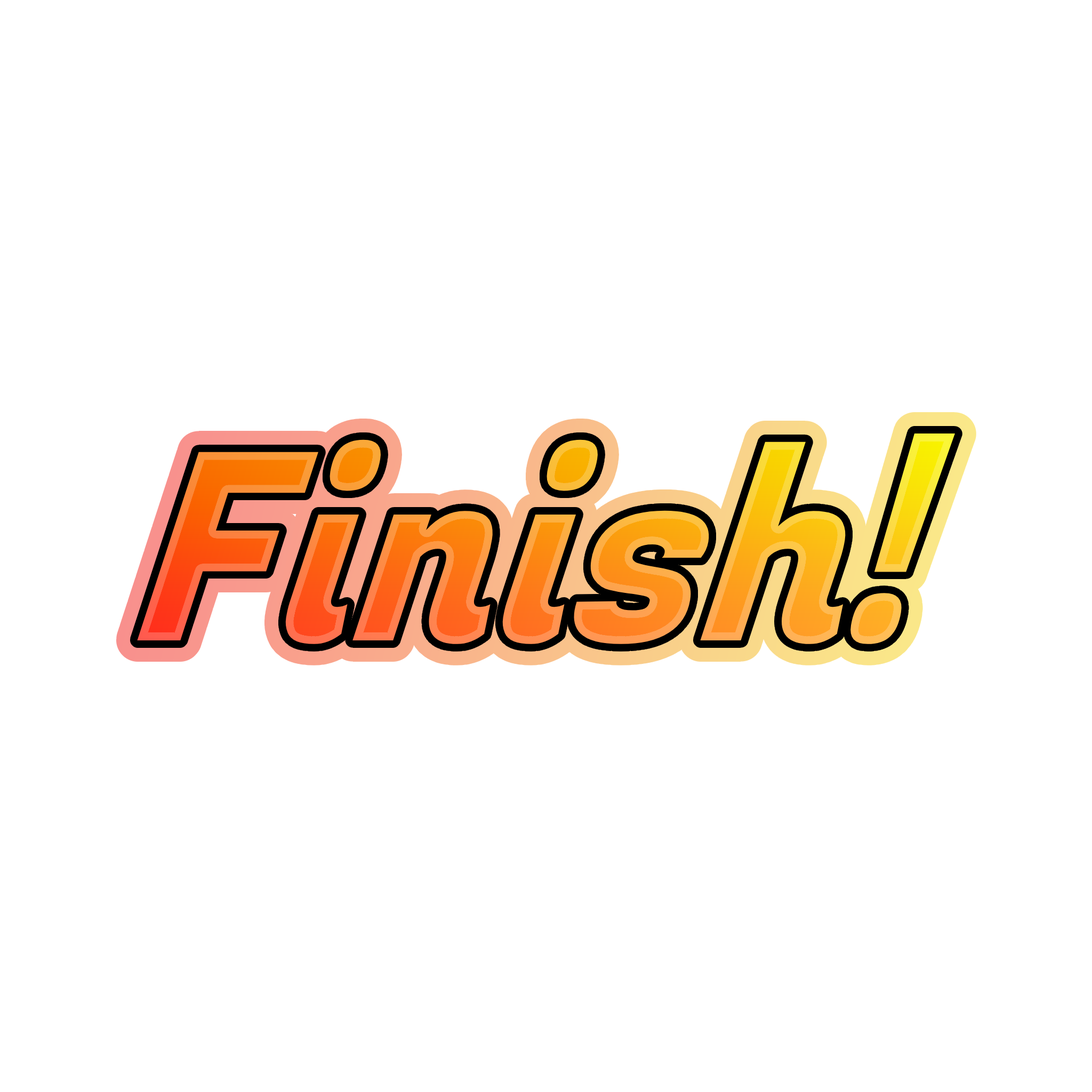
<style>
.page{position:relative;width:1092px;height:1092px;background:#ffffff}
.page>*{position:absolute;margin:0}
.t1{font:261.6px "FugazOne-Regular";font-style:italic;scale:0.91 1}
</style>
<div class="page">
<p class="t1" style="left:137px;top:433px;width:818px;height:211px">Finish!</p>
</div>
